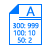
<style>
.page{position:relative;width:50px;height:50px;background:#ffffff}
.page>*{position:absolute;margin:0}
.t1{font:13px "SegoeUI";color:#0078ff}
.t2{font:7px "SegoeUI";color:#0078ff}
.t3{font:7px "SegoeUI"}
</style>
<div class="page">
<p class="t1" style="left:26px;top:6px;width:9px;height:10px">A</p>
<p class="t2" style="left:13px;top:23px;width:26px;height:6px">300: 999</p>
<p class="t3" style="left:13px;top:30px;width:23px;height:6px">100: 10</p>
<p class="t3" style="left:17px;top:37px;width:15px;height:6px">50: 2</p>
</div>
